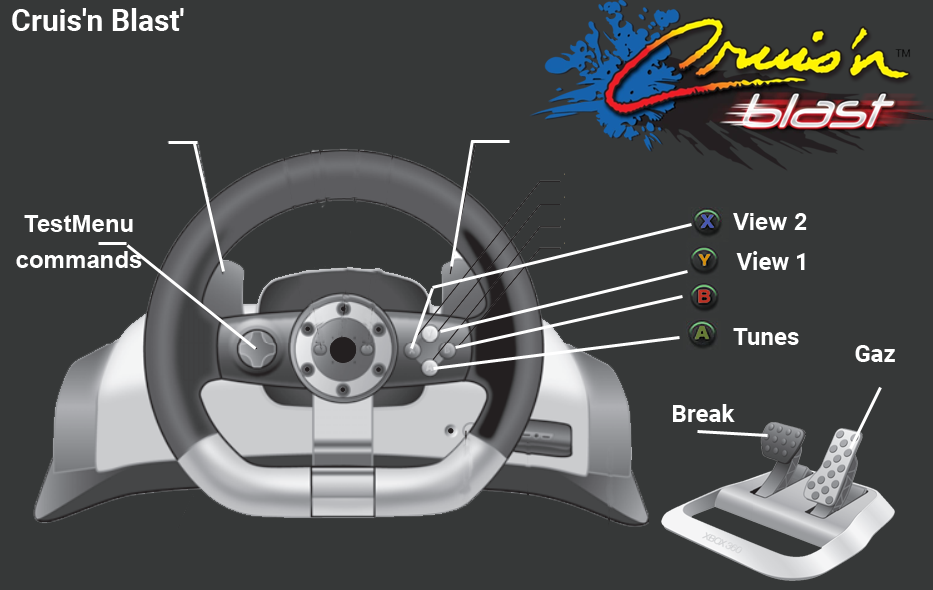
<style>
.page{position:relative;width:933px;height:590px;background:#363838}
.page>*{position:absolute;margin:0}
.t1{font:30px "Roboto-Bold";color:#ffffff}
.t2{font:24px/36px "Arial-BoldMT";color:#ffffff}
.t3{font:24px "Arial-BoldMT";color:#ffffff}
.t4{font:24px "Roboto-Bold";color:#ffffff}
</style>
<div class="page">
<p class="t1" style="left:12px;top:8px;width:172px;height:23px">Cruis'n Blast'</p>
<p class="t2" style="left:16px;top:215px;width:126px;height:53px;text-align:center">TestMenu<br>commands</p>
<p class="t3" style="left:733px;top:213px;width:74px;height:17px">View 2</p>
<p class="t4" style="left:736px;top:251px;width:69px;height:19px">View 1</p>
<p class="t4" style="left:733px;top:328px;width:66px;height:17px">Tunes</p>
<p class="t4" style="left:855px;top:345px;width:40px;height:17px">Gaz</p>
<p class="t4" style="left:673px;top:404px;width:62px;height:18px">Break</p>
</div>
